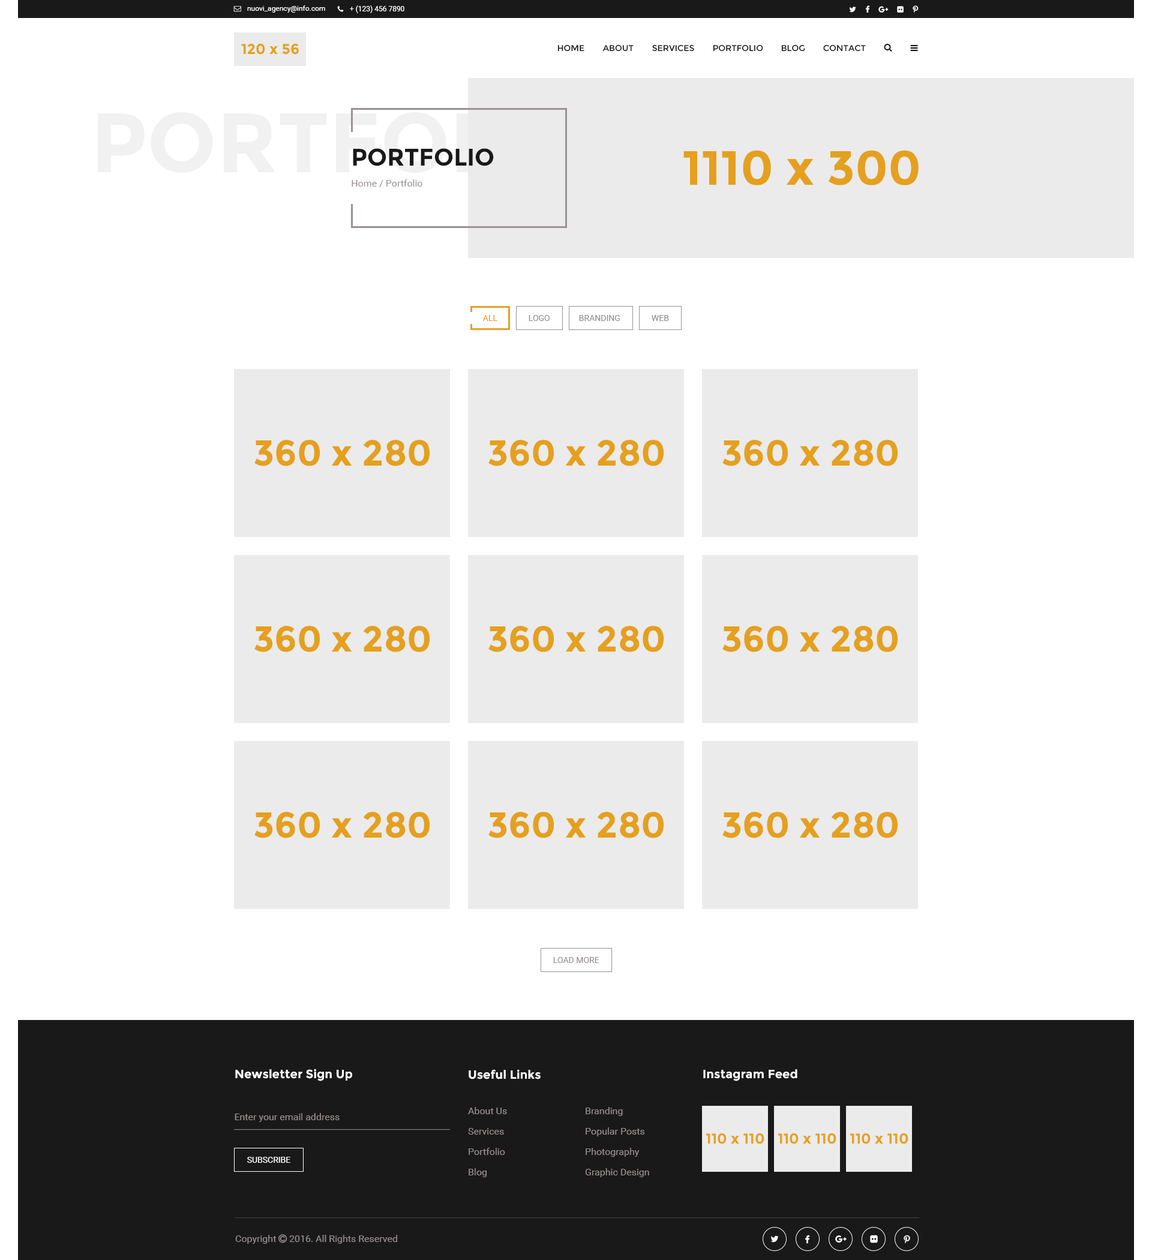
<style>
.page{position:relative;width:1152px;height:1260px;background:#ffffff}
.page>*{position:absolute;margin:0}
.t1{font:7.2px "Roboto-Regular";color:#ffffff}
.t2{font:8.4px "Montserrat-Regular";color:#191919}
.t3{font:24px "Montserrat-Bold";color:#191919}
.t4{font:9.6px "Roboto-Regular";color:#9a9191}
.t5{font:8.4px "Roboto-Regular";color:#e5a01e}
.t6{font:8.4px "Roboto-Regular";color:#9a9191}
.t7{font:12px "Montserrat-Bold";color:#ffffff}
.t8{font:8.4px "Roboto-Regular";color:#ffffff}
</style>
<div class="page">
<p class="t1" style="left:247px;top:5px;width:78px;height:8px">nuovi_agency@info.com</p>
<p class="t1" style="left:350px;top:5px;width:54px;height:8px">+ (123) 456 7890</p>
<p class="t2" style="left:557px;top:44px;width:27px;height:8px">HOME</p>
<p class="t2" style="left:602px;top:44px;width:32px;height:8px">ABOUT</p>
<p class="t2" style="left:652px;top:44px;width:42px;height:8px">SERVICES</p>
<p class="t2" style="left:713px;top:44px;width:50px;height:8px">PORTFOLIO</p>
<p class="t2" style="left:781px;top:44px;width:24px;height:8px">BLOG</p>
<p class="t2" style="left:823px;top:44px;width:43px;height:8px">CONTACT</p>
<p class="t3" style="left:353px;top:148px;width:141px;height:18px">PORTFOLIO</p>
<p class="t4" style="left:352px;top:179px;width:70px;height:8px">Home / Portfolio</p>
<p class="t5" style="left:482px;top:315px;width:15px;height:6px">ALL</p>
<p class="t6" style="left:529px;top:315px;width:21px;height:6px">LOGO</p>
<p class="t6" style="left:579px;top:315px;width:41px;height:6px">BRANDING</p>
<p class="t6" style="left:652px;top:315px;width:17px;height:6px">WEB</p>
<p class="t6" style="left:553px;top:957px;width:46px;height:6px">LOAD MORE</p>
<p class="t7" style="left:235px;top:1069px;width:117px;height:12px">Newsletter Sign Up</p>
<p class="t7" style="left:469px;top:1069px;width:72px;height:10px">Useful Links</p>
<p class="t7" style="left:703px;top:1069px;width:94px;height:12px">Instagram Feed</p>
<p class="t4" style="left:468px;top:1107px;width:39px;height:7px">About Us</p>
<p class="t4" style="left:586px;top:1107px;width:37px;height:9px">Branding</p>
<p class="t4" style="left:235px;top:1113px;width:105px;height:9px">Enter your email address</p>
<p class="t4" style="left:468px;top:1128px;width:36px;height:7px">Services</p>
<p class="t4" style="left:586px;top:1127px;width:58px;height:9px">Popular Posts</p>
<p class="t8" style="left:247px;top:1157px;width:43px;height:6px">SUBSCRIBE</p>
<p class="t4" style="left:469px;top:1148px;width:36px;height:7px">Portfolio</p>
<p class="t4" style="left:586px;top:1148px;width:54px;height:9px">Photography</p>
<p class="t4" style="left:469px;top:1168px;width:18px;height:9px">Blog</p>
<p class="t4" style="left:585px;top:1168px;width:64px;height:9px">Graphic Design</p>
</div>
